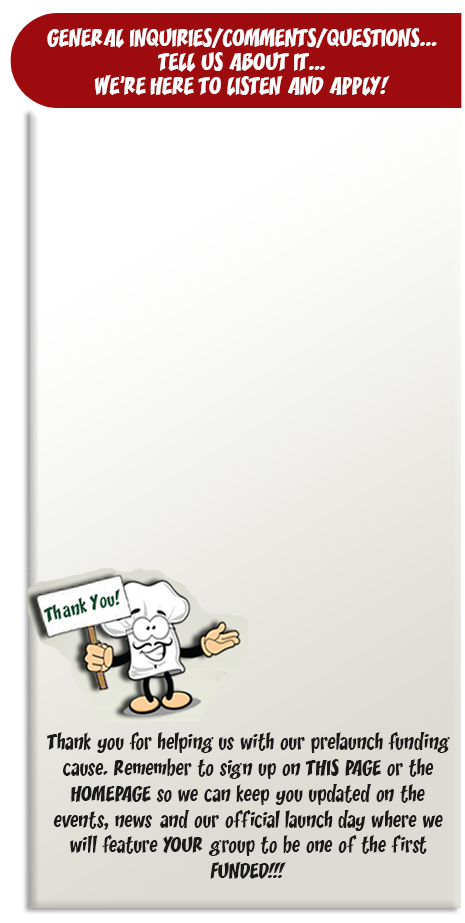
<style>
.page{position:relative;width:465px;height:923px;background:#ffffff}
.page>*{position:absolute;margin:0}
.t1{font:22px/24px "Yikes";letter-spacing:-0.025em;color:#ffffff;text-transform:uppercase}
.t2{font:19.4px/25.8px "Yikes";color:#191919}
</style>
<div class="page">
<p class="t1" style="left:47px;top:28px;width:390px;height:68px;text-align:center">general inquiries/comments/questions...<br>tell us about it...<br>we’re here to listen and apply!</p>
<p class="t2" style="left:47px;top:732px;width:404px;height:147px;text-align:center">Thank you for helping us with our prelaunch funding<br>cause. Remember to sign up on THIS PAGE or the<br>HOMEPAGE so we can keep you updated on the<br>events, news and our official launch day where we<br>will feature YOUR group to be one of the first<br>FUNDED!!!</p>
</div>
